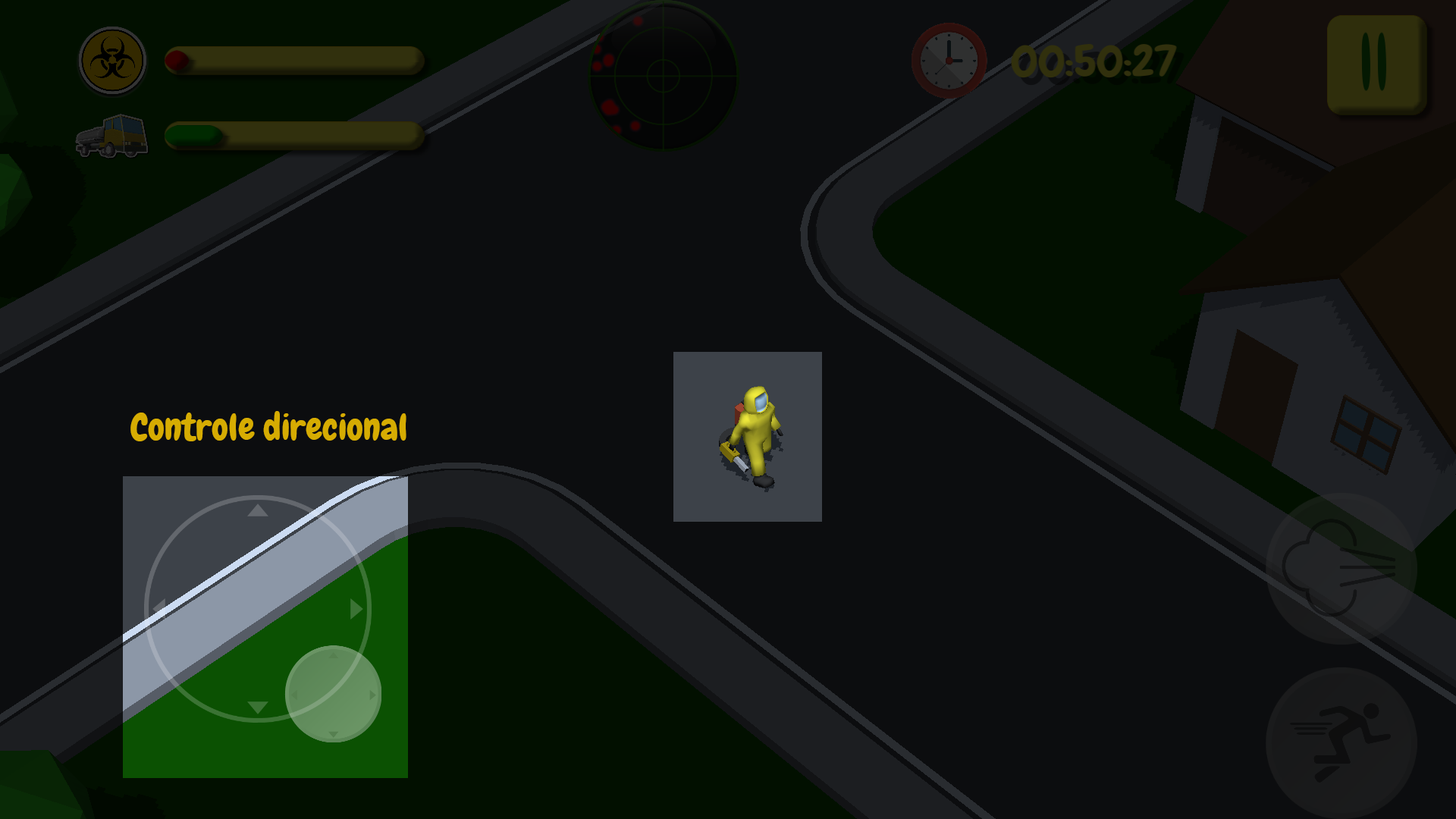
<style>
.page{position:relative;width:1456px;height:819px;background:#0c0d0f}
.page>*{position:absolute;margin:0}
.t1{font:37.1px "Chewy-Regular";color:#d6ac02}
</style>
<div class="page">
<p class="t1" style="left:130px;top:411px;width:276px;height:30px">Controle direcional</p>
</div>
